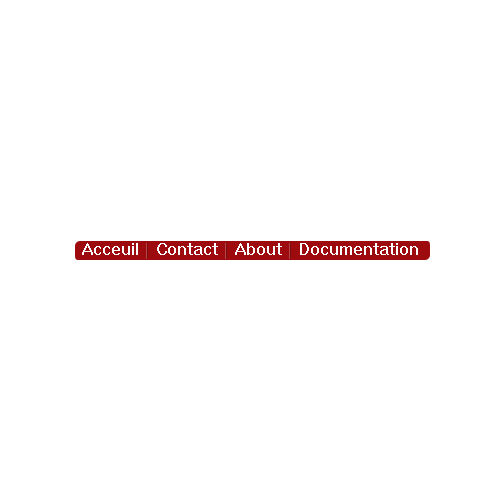
<style>
.page{position:relative;width:500px;height:500px;background:#ffffff}
.page>*{position:absolute;margin:0}
.t1{font:16px "System";color:#ffffff}
</style>
<div class="page">
<p class="t1" style="left:82px;top:243px;width:336px;height:12px">Acceuil    Contact    About    Documentation</p>
</div>
